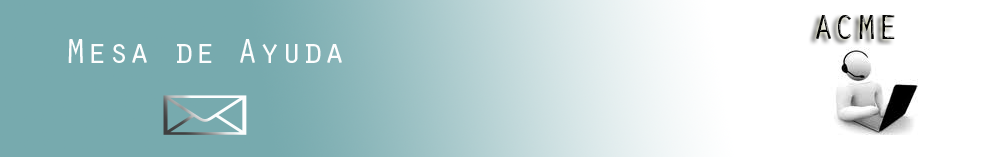
<style>
.page{position:relative;width:999px;height:157px;background:#77aaae}
.page>*{position:absolute;margin:0}
.t1{font:36px "OratorStd";color:#020202}
.t2{font:36px "OratorStd";color:#fcfdfd}
</style>
<div class="page">
<p class="t1" style="left:816px;top:15px;width:79px;height:24px">ACME</p>
<p class="t2" style="left:68px;top:39px;width:274px;height:24px">Mesa de Ayuda</p>
</div>
